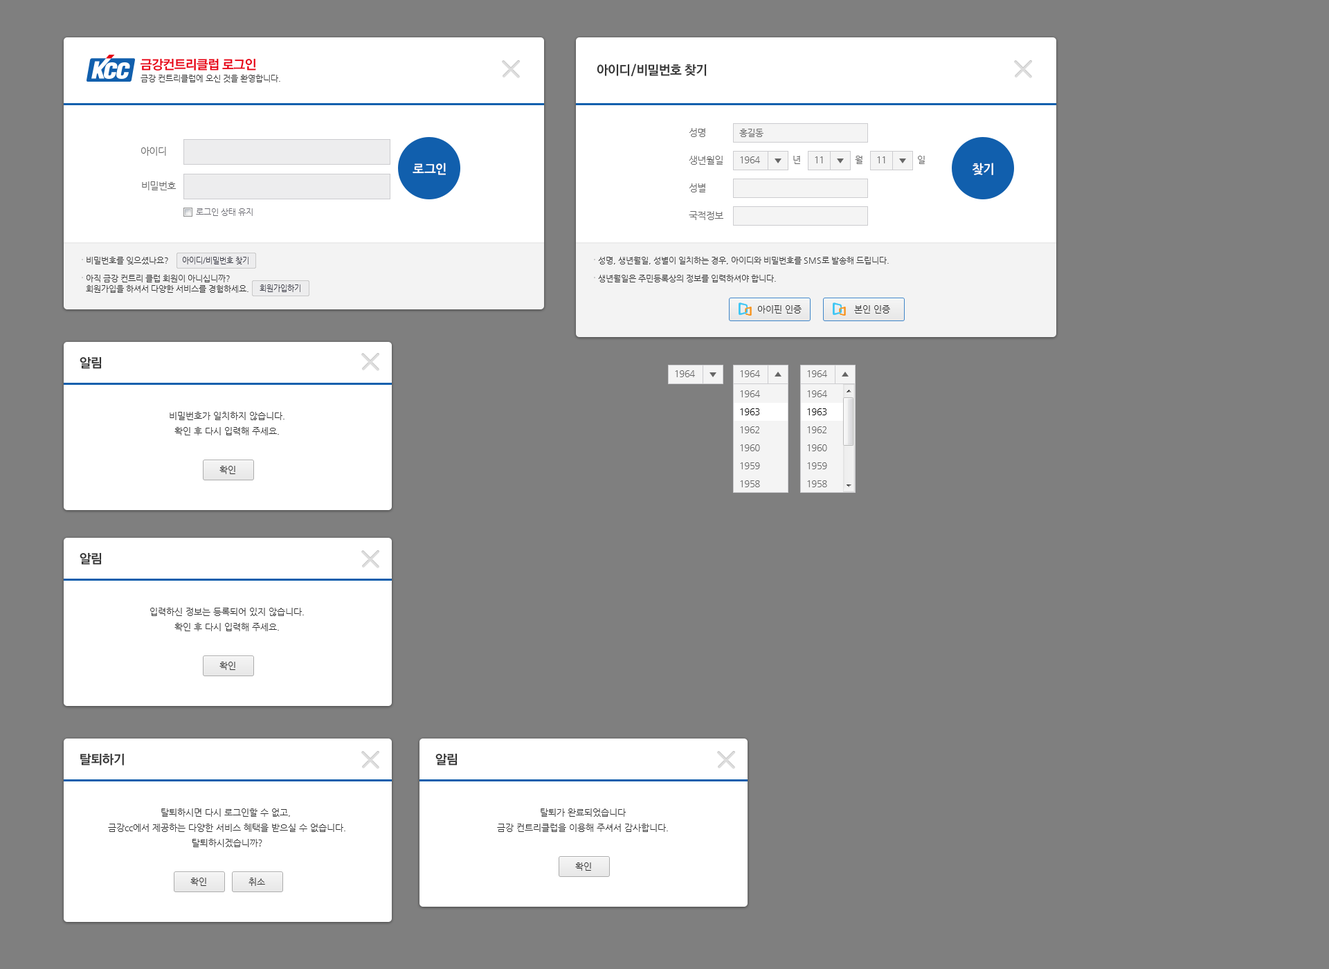
<style>
.page{position:relative;width:1329px;height:969px;background:#7f7f7f}
.page>*{position:absolute;margin:0}
.t1{font:12.7px "RixGoB";letter-spacing:-0.04em;color:#e60012;text-transform:uppercase}
.t2{font:12.7px "RixGoB";letter-spacing:-0.04em;color:#333333;text-transform:uppercase}
.t3{font:8.3px "NanumGothic";color:#333333}
.t4{font:9.7px/27.7px "NanumGothic";letter-spacing:-0.04em;color:#666666;text-transform:uppercase}
.t5{font:9px "NanumGothic";letter-spacing:-0.04em;color:#666666;text-transform:uppercase}
.t6{font:9.7px "NanumGothic";letter-spacing:-0.04em;color:#666666;text-transform:uppercase}
.t7{font:12.5px "NanumGothicBold";letter-spacing:-0.04em;color:#ffffff;scale:0.97 1}
.t8{font:8.3px "NanumGothic";color:#6f6f76}
.t9{font:7.6px "NanumGothic";color:#353642}
.t10{font:8.3px/10.4px "NanumGothic";color:#333333}
.t11{font:9px "NanumGothic";color:#333333}
.t12{font:9px/18px "NanumGothic";letter-spacing:-0.04em;color:#666666;text-transform:uppercase}
.t13{font:9px/18px "NanumGothic";letter-spacing:-0.04em;color:#000000;text-transform:uppercase}
.t14{font:9px/15.2px "NanumGothic";color:#333333}
</style>
<div class="page">
<p class="t1" style="left:141px;top:58px;width:115px;height:13px">금강컨트리클럽 로그인</p>
<p class="t2" style="left:597px;top:64px;width:110px;height:13px">아이디/비밀번호 찾기</p>
<p class="t3" style="left:141px;top:75px;width:139px;height:7px">금강 컨트리클럽에 오신 것을 환영합니다.</p>
<p class="t4" style="left:689px;top:128px;width:34px;height:92px">성명<br>생년월일<br>성별<br>국적정보</p>
<p class="t5" style="left:739px;top:129px;width:25px;height:8px">홍길동</p>
<p class="t6" style="left:141px;top:147px;width:25px;height:9px">아이디</p>
<p class="t5" style="left:740px;top:156px;width:20px;height:7px">1964</p>
<p class="t5" style="left:793px;top:156px;width:7px;height:8px">년</p>
<p class="t5" style="left:815px;top:156px;width:8px;height:7px">11</p>
<p class="t5" style="left:855px;top:156px;width:8px;height:8px">월</p>
<p class="t5" style="left:877px;top:156px;width:8px;height:7px">11</p>
<p class="t5" style="left:918px;top:156px;width:7px;height:8px">일</p>
<p class="t7" style="left:413px;top:163px;width:33px;height:12px">로그인</p>
<p class="t7" style="left:973px;top:163px;width:20px;height:12px">찾기</p>
<p class="t6" style="left:142px;top:181px;width:34px;height:9px">비밀번호</p>
<p class="t8" style="left:196px;top:208px;width:57px;height:8px">로그인 상태 유지</p>
<p class="t3" style="left:87px;top:257px;width:81px;height:7px">비밀번호를 잊으셨나요?</p>
<p class="t9" style="left:182px;top:257px;width:67px;height:7px">아이디/비밀번호 찾기</p>
<p class="t3" style="left:598px;top:257px;width:291px;height:7px">성명, 생년월일, 성별이 일치하는 경우, 아이디와 비밀번호를 SMS로 발송해 드립니다.</p>
<p class="t10" style="left:86px;top:275px;width:163px;height:18px">아직 금강 컨트리 클럽 회원이 아니십니까?<br>회원가입을 하셔서 다양한 서비스를 경험하세요.</p>
<p class="t3" style="left:598px;top:275px;width:178px;height:7px">생년월일은 주민등록상의 정보를 입력하셔야 합니다.</p>
<p class="t9" style="left:260px;top:285px;width:40px;height:7px">회원가입하기</p>
<p class="t11" style="left:758px;top:305px;width:44px;height:9px">아이핀 인증</p>
<p class="t11" style="left:854px;top:305px;width:36px;height:9px">본인 인증</p>
<p class="t2" style="left:80px;top:357px;width:22px;height:12px">알림</p>
<p class="t5" style="left:675px;top:370px;width:20px;height:7px">1964</p>
<p class="t5" style="left:740px;top:370px;width:20px;height:7px">1964</p>
<p class="t5" style="left:807px;top:370px;width:20px;height:7px">1964</p>
<p class="t12" style="left:740px;top:390px;width:20px;height:97px">1964<br><span class="t13">1963<br></span>1962<br>1960<br>1959<br>1958</p>
<p class="t12" style="left:807px;top:390px;width:20px;height:97px">1964<br><span class="t13">1963<br></span>1962<br>1960<br>1959<br>1958</p>
<p class="t14" style="left:170px;top:412px;width:115px;height:23px;text-align:center">비밀번호가 일치하지 않습니다.<br>확인 후 다시 입력해 주세요.</p>
<p class="t11" style="left:219px;top:466px;width:16px;height:8px">확인</p>
<p class="t2" style="left:80px;top:552px;width:22px;height:13px">알림</p>
<p class="t14" style="left:150px;top:608px;width:154px;height:23px;text-align:center">입력하신 정보는 등록되어 있지 않습니다.<br>확인 후 다시 입력해 주세요.</p>
<p class="t11" style="left:219px;top:662px;width:16px;height:8px">확인</p>
<p class="t2" style="left:80px;top:753px;width:44px;height:13px">탈퇴하기</p>
<p class="t2" style="left:435px;top:753px;width:23px;height:13px">알림</p>
<p class="t14" style="left:108px;top:809px;width:237px;height:38px;text-align:center">탈퇴하시면 다시 로그인할 수 없고, <br>금강cc에서 제공하는 다양한 서비스 혜택을 받으실 수 없습니다.<br>탈퇴하시겠습니까?</p>
<p class="t14" style="left:497px;top:809px;width:171px;height:23px;text-align:center">탈퇴가 완료되었습니다<br>금강 컨트리클럽을 이용해 주셔서 감사합니다.</p>
<p class="t11" style="left:575px;top:863px;width:16px;height:8px">확인</p>
<p class="t11" style="left:190px;top:878px;width:16px;height:8px">확인</p>
<p class="t11" style="left:249px;top:878px;width:16px;height:8px">취소</p>
</div>
